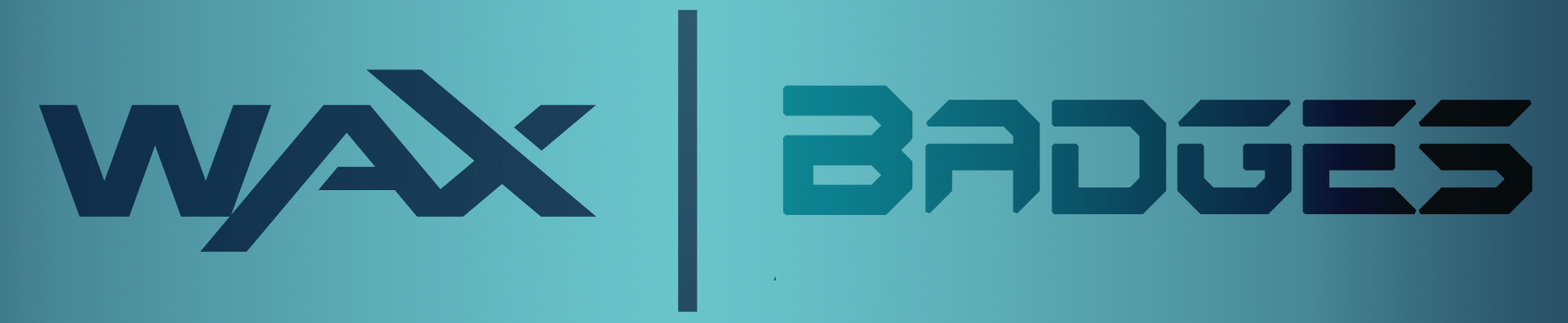
<style>
.page{position:relative;width:1568px;height:323px}
.page>*{position:absolute;margin:0}
.t1{font:175.2px "Aerospace";letter-spacing:-0.06em;font-weight:bold}
.t2{font:198.3px "Aerospace";letter-spacing:-0.06em;font-weight:bold}
</style>
<div class="page">
<p class="t1" style="left:783px;top:85px;width:750px;height:130px"><span class="t2">B</span>ADGEs</p>
</div>
